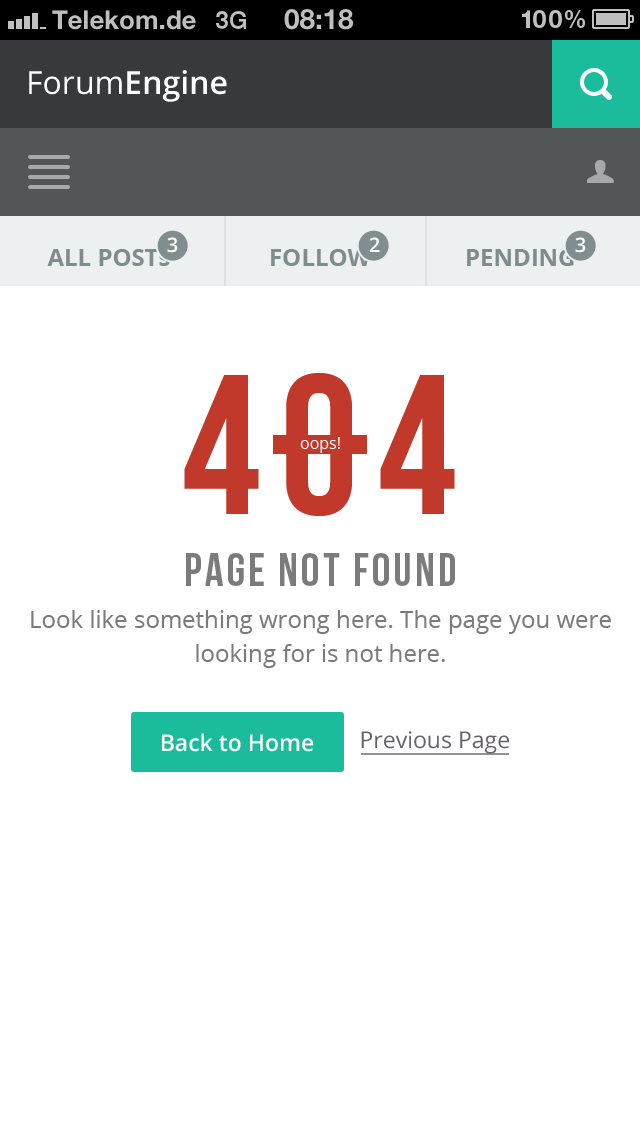
<style>
.page{position:relative;width:640px;height:1136px;background:#ffffff}
.page>*{position:absolute;margin:0}
.t1{font:32px "OpenSans-Semibold";color:#ffffff}
.t2{font:32px "OpenSans";color:#ffffff}
.t3{font:32px "PictosRIP";color:#a5a9ac}
.t4{font:20px "OpenSans-Semibold";color:#ffffff;text-transform:uppercase}
.t5{font:24px "OpenSans-Bold";color:#7f8c8d}
.t6{font:198px "BebasNeue";letter-spacing:0.1em;color:#c0392b}
.t7{font:16px "OpenSans";color:#ffffff}
.t8{font:46px "BebasNeue";letter-spacing:0.07em;color:#7b7b7b}
.t9{font:24px/34px "OpenSans";color:#7b7b7b}
.t10{font:23px "OpenSans-Semibold";color:#ffffff}
.t11{font:23px "OpenSans";color:#656268}
</style>
<div class="page">
<p class="t1" style="left:29px;top:70px;width:198px;height:32px"><span class="t2">Forum</span>Engine</p>
<p class="t3" style="left:587px;top:160px;width:27px;height:23px">U</p>
<p class="t4" style="left:167px;top:237px;width:11px;height:16px">3</p>
<p class="t4" style="left:369px;top:237px;width:11px;height:15px">2</p>
<p class="t4" style="left:575px;top:237px;width:11px;height:16px">3</p>
<p class="t5" style="left:47px;top:249px;width:123px;height:17px">ALL POSTs</p>
<p class="t5" style="left:271px;top:249px;width:100px;height:17px">FOLLOW</p>
<p class="t5" style="left:467px;top:249px;width:107px;height:17px">PENDING</p>
<p class="t6" style="left:184px;top:373px;width:271px;height:143px">404</p>
<p class="t7" style="left:300px;top:437px;width:40px;height:16px">oops!</p>
<p class="t8" style="left:186px;top:553px;width:269px;height:33px">page not found</p>
<p class="t9" style="left:31px;top:610px;width:580px;height:58px;text-align:center">Look like something wrong here. The page you were looking for is not here.</p>
<p class="t10" style="left:162px;top:733px;width:152px;height:19px">Back to Home</p>
<p class="t11" style="left:361px;top:731px;width:148px;height:23px">Previous Page</p>
</div>
